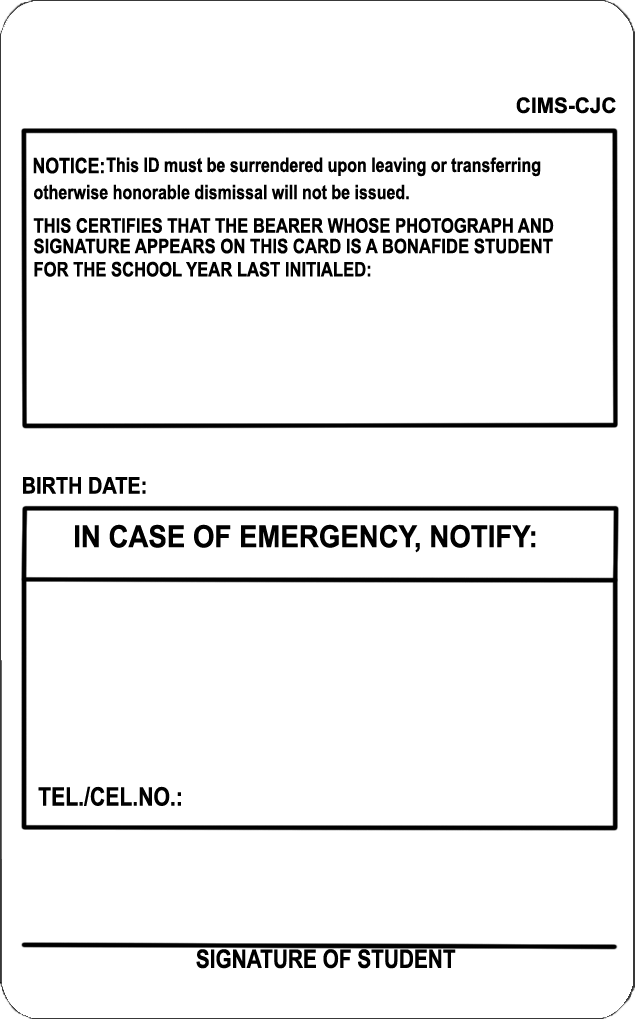
<style>
.page{position:relative;width:635px;height:1019px;background:#ffffff}
.page>*{position:absolute;margin:0}
.t1{font:21.3px "Arial-BoldMT";color:#000000}
.t2{font:21.3px "Arial-BoldMT";color:#000000;scale:0.83 1}
.t3{font:19.8px "Arial-BoldMT";color:#000000;scale:0.81 1}
.t4{font:20px "Arial-BoldMT";color:#000000;scale:0.83 1}
.t5{font:20px "Arial-BoldMT";color:#000000;scale:0.84 1}
.t6{font:22.9px "Arial-BoldMT";color:#000000;scale:0.87 1}
.t7{font:30.6px "Arial-BoldMT";color:#000000;scale:0.9 1}
.t8{font:25.4px "Arial-BoldMT";color:#000000;scale:0.83 1}
.t9{font:25.4px "Arial-BoldMT";color:#000000;scale:0.82 1}
</style>
<div class="page">
<p class="t1" style="left:516px;top:97px;width:100px;height:17px">CIMS-CJC</p>
<p class="t2" style="left:33px;top:157px;width:71px;height:17px">NOTICE:</p>
<p class="t3" style="left:106px;top:157px;width:435px;height:20px">This ID must be surrendered upon leaving or transferring</p>
<p class="t3" style="left:34px;top:184px;width:375px;height:16px">otherwise honorable dismissal will not be issued.</p>
<p class="t4" style="left:33px;top:218px;width:521px;height:15px">THIS CERTIFIES THAT THE BEARER WHOSE PHOTOGRAPH AND</p>
<p class="t5" style="left:34px;top:238px;width:519px;height:16px">SIGNATURE APPEARS ON THIS CARD IS A BONAFIDE STUDENT</p>
<p class="t4" style="left:34px;top:261px;width:337px;height:16px">FOR THE SCHOOL YEAR LAST INITIALED:</p>
<p class="t6" style="left:23px;top:477px;width:123px;height:17px">BIRTH DATE:</p>
<p class="t7" style="left:75px;top:524px;width:461px;height:29px">IN CASE OF EMERGENCY, NOTIFY:</p>
<p class="t8" style="left:38px;top:786px;width:143px;height:20px">TEL./CEL.NO.:</p>
<p class="t9" style="left:196px;top:949px;width:260px;height:20px">SIGNATURE OF STUDENT</p>
</div>
